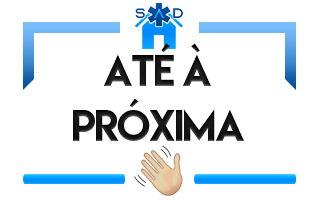
<style>
.page{position:relative;width:319px;height:200px;background:#ffffff}
.page>*{position:absolute;margin:0}
.t1{font:39.3px/54.7px "LemonMilk";letter-spacing:-0.04em;color:#000000}
</style>
<div class="page">
<p class="t1" style="left:73px;top:43px;width:171px;height:98px;text-align:center">ATÉ À<br>PRÓXIMA</p>
</div>
